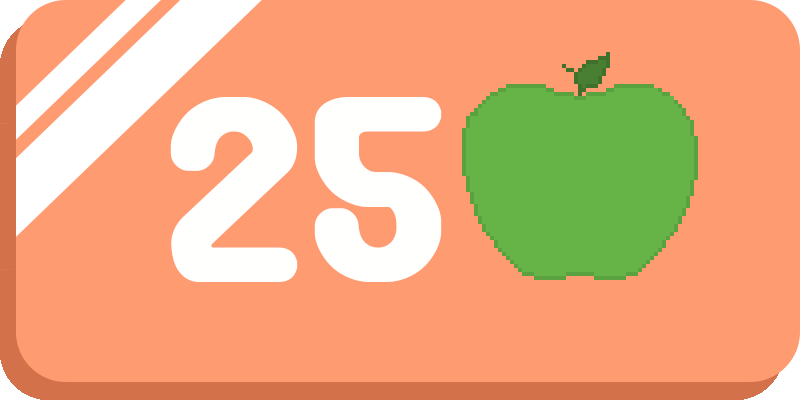
<style>
.page{position:relative;width:800px;height:400px;background:#ff9b71}
.page>*{position:absolute;margin:0}
.t1{font:226.2px "Round_Pop";color:#fffffe}
</style>
<div class="page">
<p class="t1" style="left:170px;top:97px;width:272px;height:185px">25</p>
</div>
